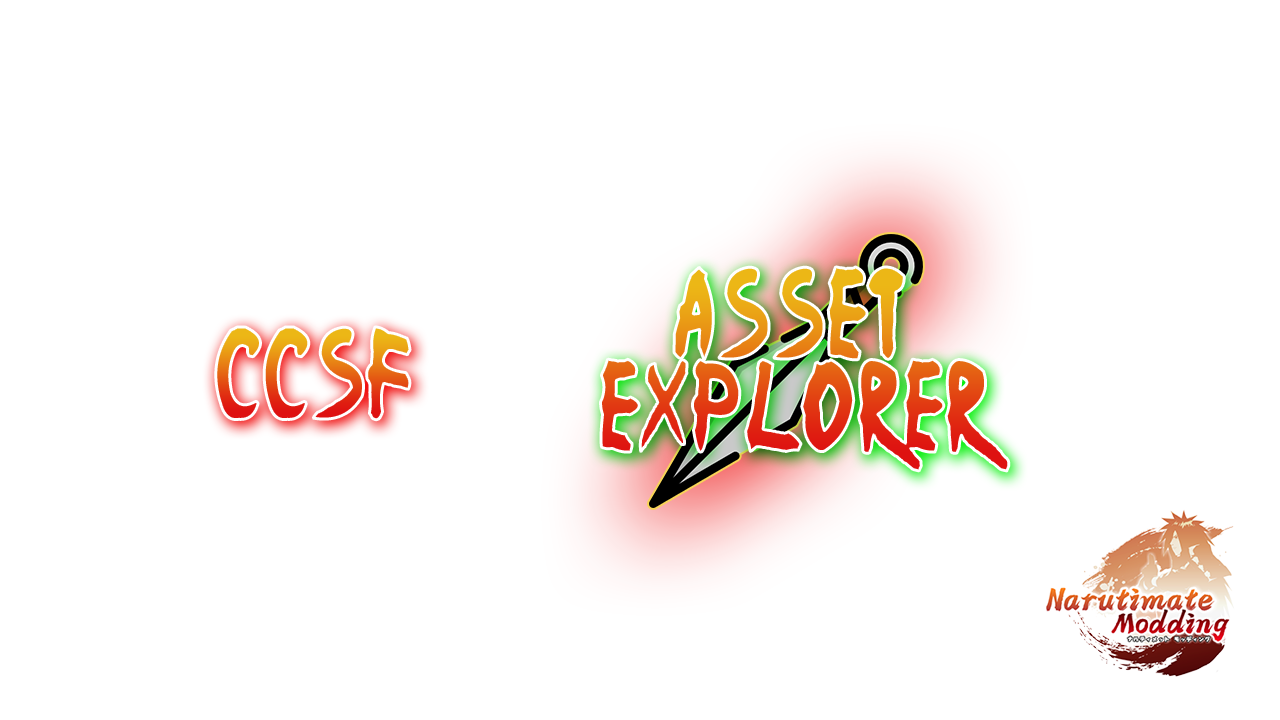
<style>
.page{position:relative;width:1280px;height:720px;background:#ffffff}
.page>*{position:absolute;margin:0}
.t1{font:102px/46.1px "Ninja-Naruto";letter-spacing:0.03em;scale:0.74 1}
.t2{font:102px "Ninja-Naruto";letter-spacing:0.03em;scale:0.74 1}
</style>
<div class="page">
<p class="t1" style="left:600px;top:267px;width:409px;height:204px;text-align:center">asset<br><br>explorer</p>
<p class="t2" style="left:215px;top:327px;width:195px;height:93px">CCSF</p>
</div>
